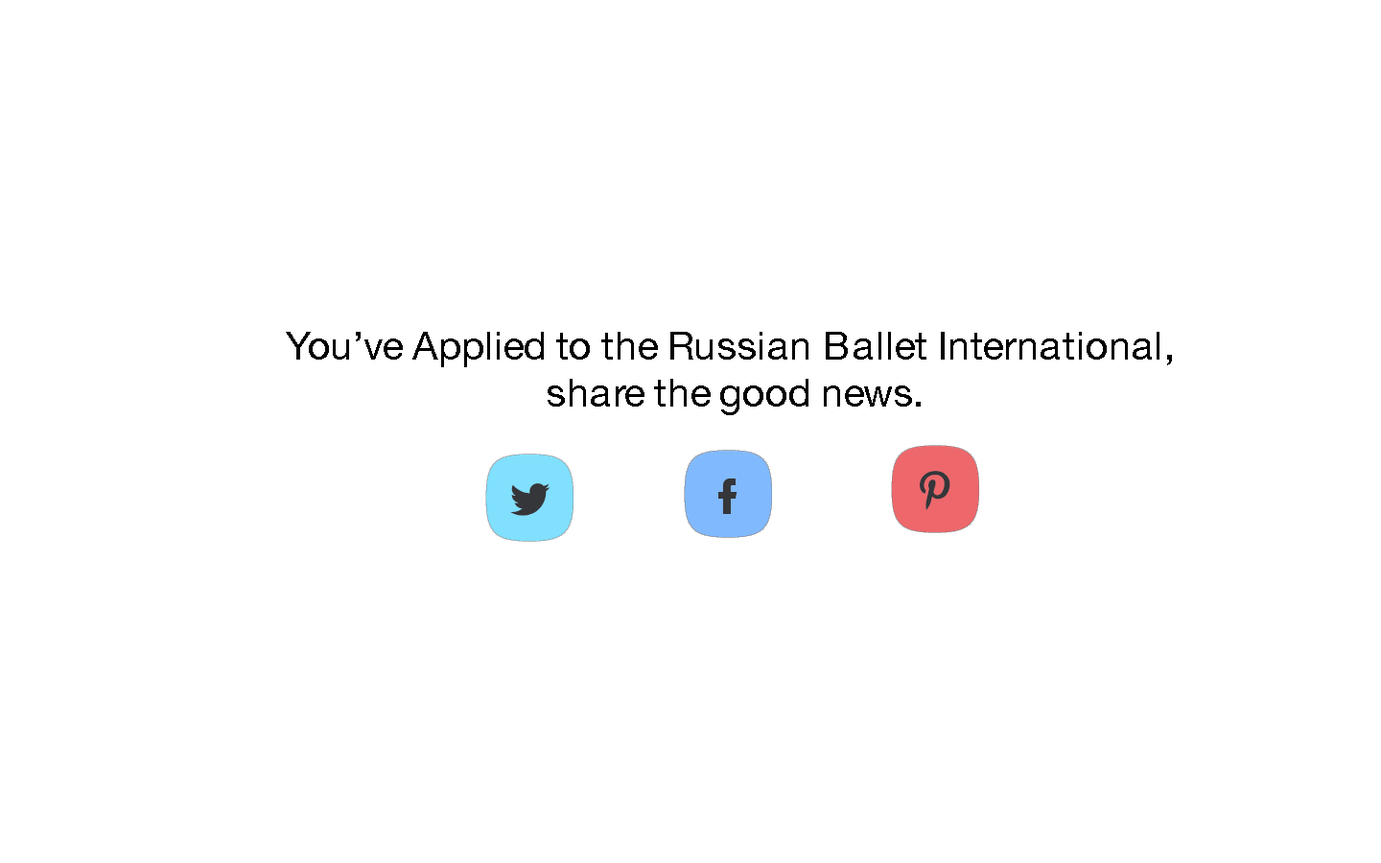
<style>
.page{position:relative;width:1381px;height:863px;background:#ffffff}
.page>*{position:absolute;margin:0}
.t1{font:39.2px "HelveticaNeue";color:#000000}
</style>
<div class="page">
<p class="t1" style="left:286px;top:332px;width:886px;height:83px;text-align:center">You’ve Applied to the Russian Ballet International, <br>share the good news.</p>
</div>
